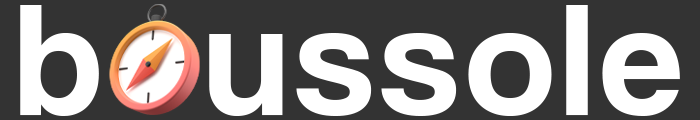
<style>
.page{position:relative;width:700px;height:120px;background:#333333}
.page>*{position:absolute;margin:0}
.t1{font:165.2px "CoolveticaRg-Regular";letter-spacing:0.045em;color:#ffffff}
</style>
<div class="page">
<p class="t1" style="left:20px;top:5px;width:660px;height:111px">b  ussole</p>
</div>
